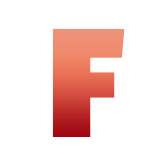
<style>
.page{position:relative;width:166px;height:166px;background:#ffffff}
.page>*{position:absolute;margin:0}
.t1{font:174px "PassionOne-Bold"}
</style>
<div class="page">
<p class="t1" style="left:52px;top:28px;width:73px;height:109px">F</p>
</div>
